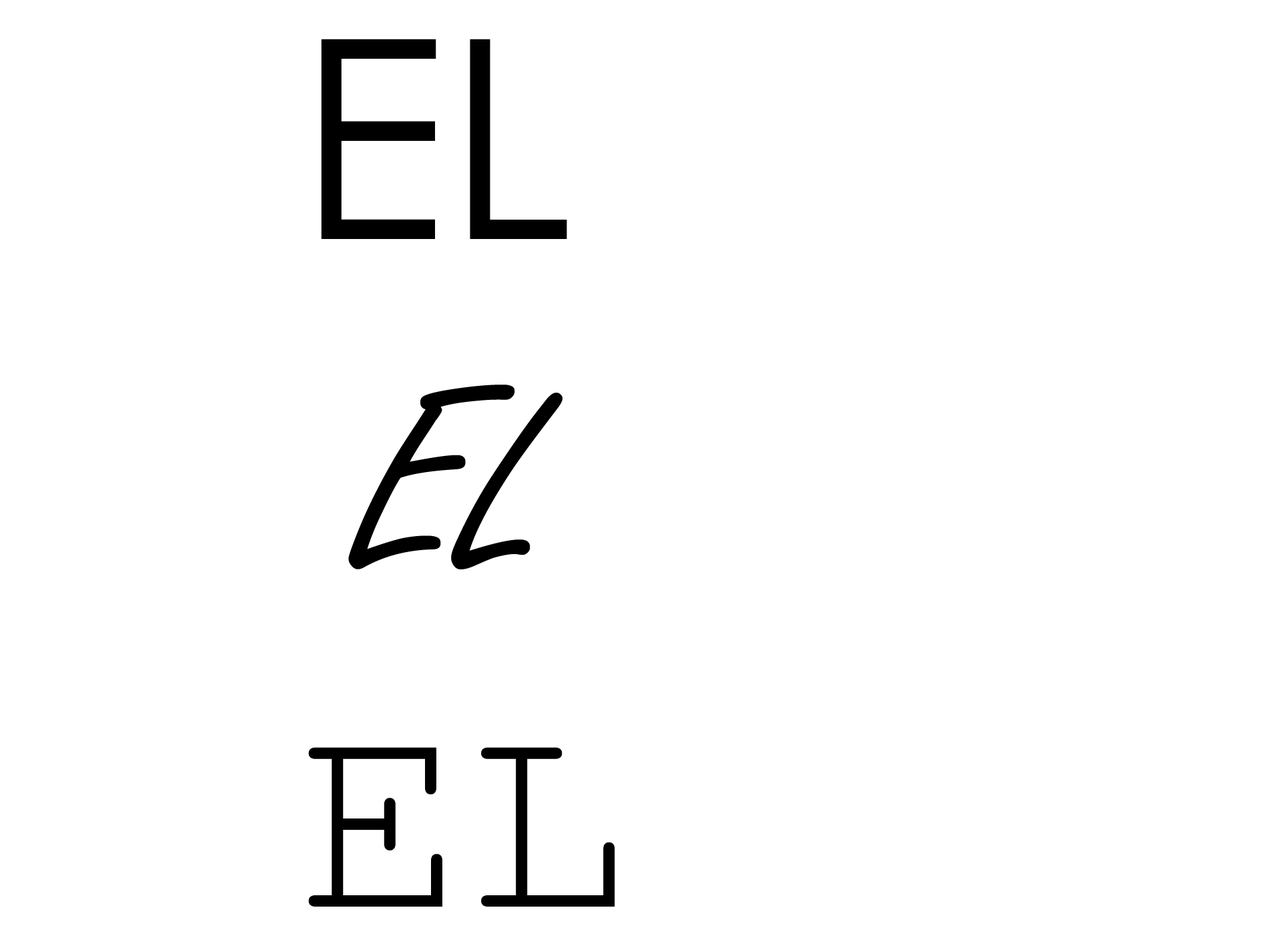
<style>
.page{position:relative;width:1261px;height:946px;background:#ffffff}
.page>*{position:absolute;margin:0}
.t1{font:278px "CenturyGothic";color:#000000}
.t2{font:278px "FreestyleScript-Regular";color:#000000}
.t3{font:278px "CourierNewPSMT";color:#000000}
</style>
<div class="page">
<p class="t1" style="left:308px;top:39px;width:307px;height:867px">EL<br> <span class="t2">EL<br></span><span class="t3">EL</span></p>
</div>
